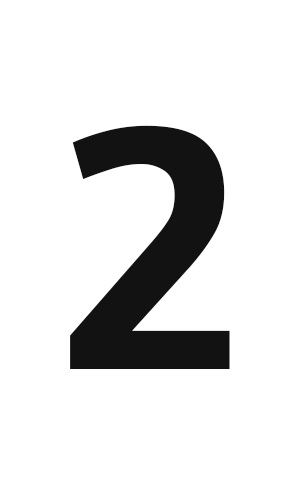
<style>
.page{position:relative;width:300px;height:500px;background:#ffffff}
.page>*{position:absolute;margin:0}
.t1{font:335px "GyeonggiTitleV";color:#121212}
</style>
<div class="page">
<p class="t1" style="left:70px;top:125px;width:160px;height:244px">2</p>
</div>
